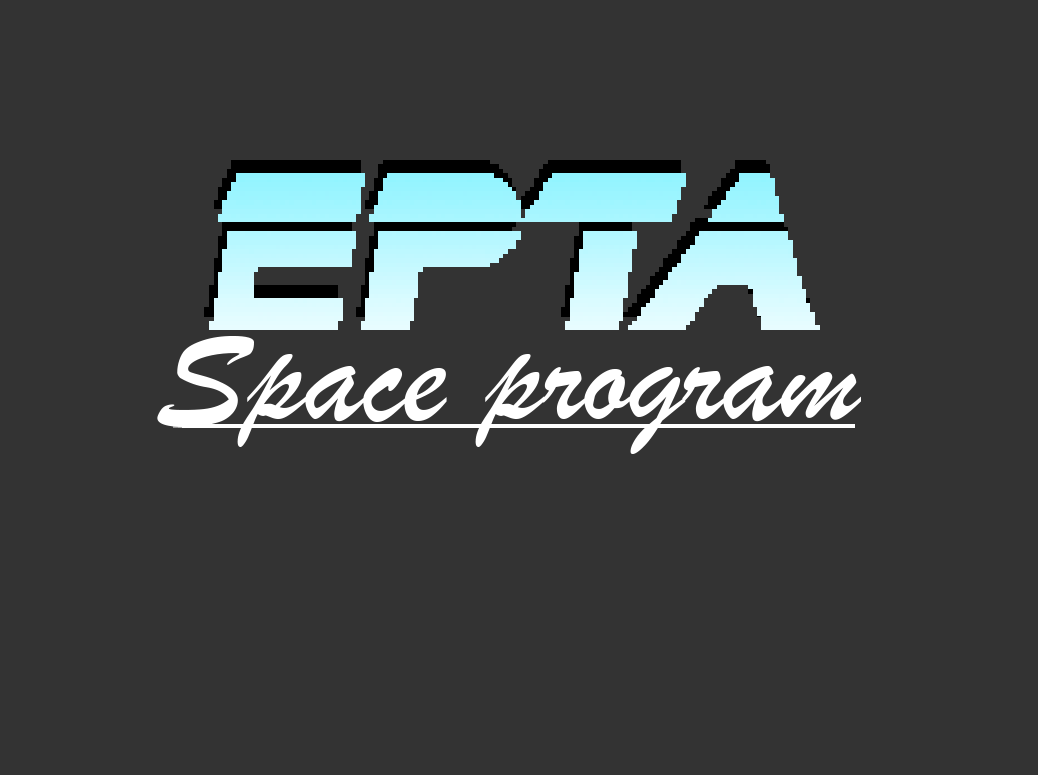
<style>
.page{position:relative;width:1038px;height:775px;background:#333333}
.page>*{position:absolute;margin:0}
.t1{font:142px "BrushScriptMT";color:#ffffff}
</style>
<div class="page">
<p class="t1" style="left:157px;top:336px;width:704px;height:118px">Space program</p>
</div>
